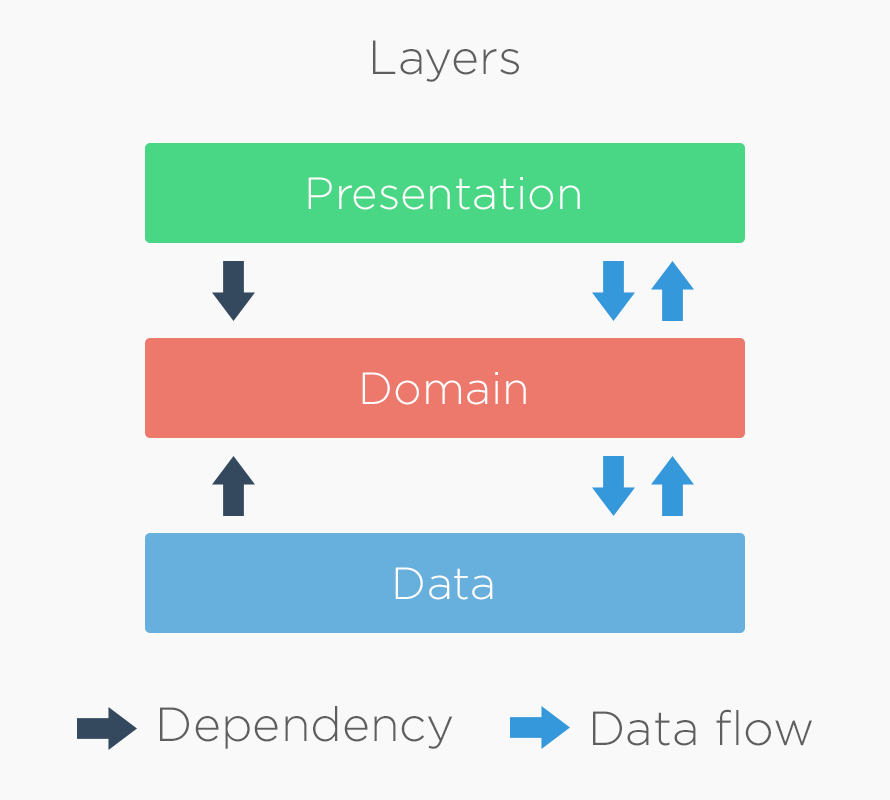
<style>
.page{position:relative;width:890px;height:800px;background:#f9f9f9}
.page>*{position:absolute;margin:0}
.t1{font:48px "GothamPro-Light";color:#5f5d5d}
.t2{font:45px "GothamPro-Light";color:#ffffff}
</style>
<div class="page">
<p class="t1" style="left:373px;top:40px;width:146px;height:42px">Layers</p>
<p class="t2" style="left:308px;top:177px;width:272px;height:33px">Presentation</p>
<p class="t2" style="left:362px;top:372px;width:164px;height:33px">Domain</p>
<p class="t2" style="left:395px;top:567px;width:98px;height:33px">Data</p>
<p class="t1" style="left:160px;top:706px;width:293px;height:43px">Dependency</p>
<p class="t1" style="left:593px;top:709px;width:219px;height:37px">Data flow</p>
</div>
